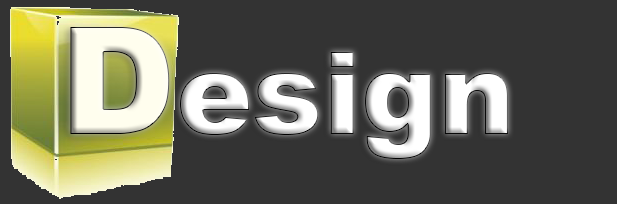
<style>
.page{position:relative;width:617px;height:204px;background:#333333}
.page>*{position:absolute;margin:0}
.t1{font:115px "Arial-Black";color:#ffffff}
.t2{font:150px "Arial-Black";color:#fffeee}
</style>
<div class="page">
<p class="t1" style="left:70px;top:27px;width:438px;height:132px"><span class="t2">D</span>esign</p>
</div>
